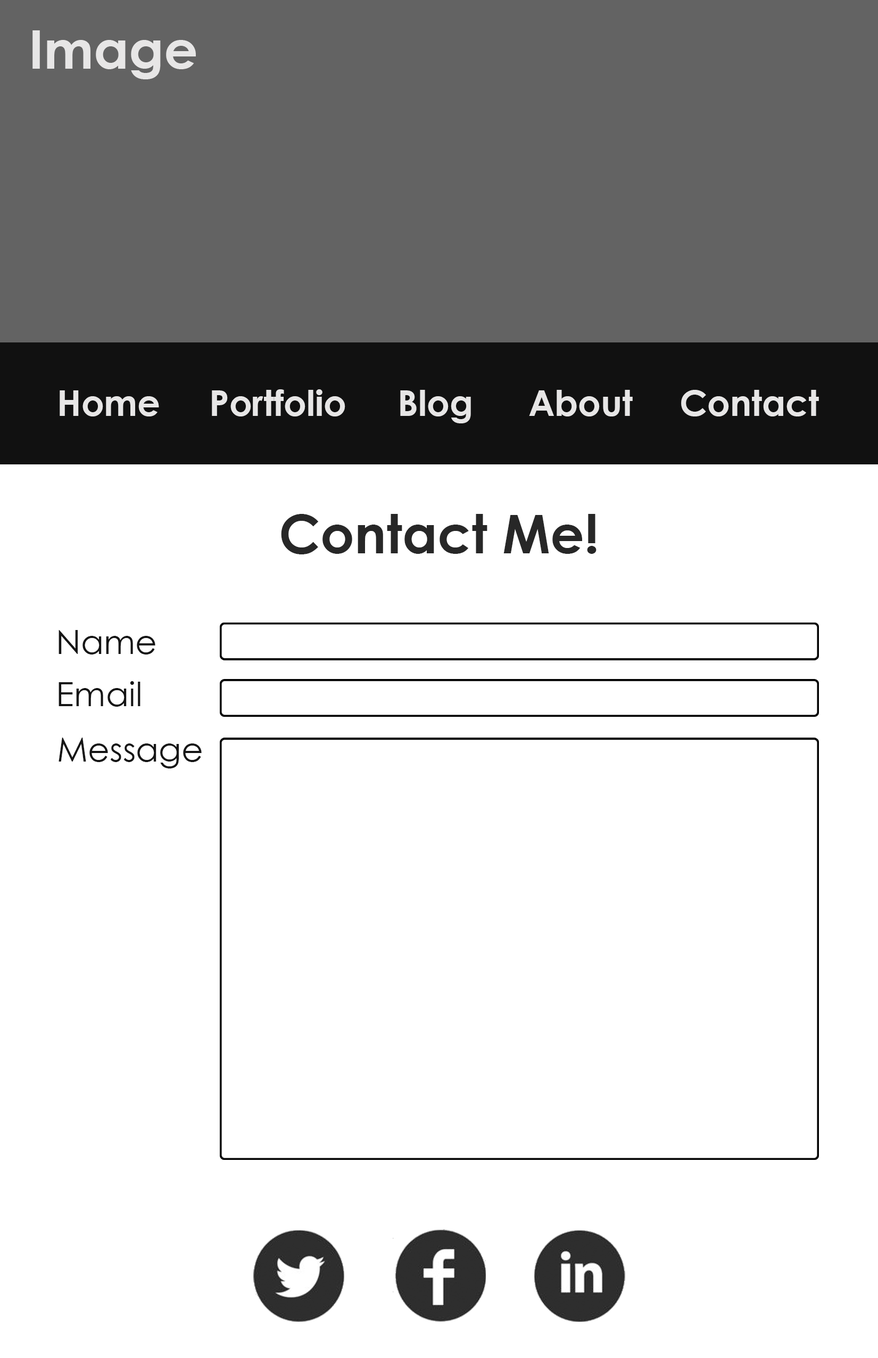
<style>
.page{position:relative;width:878px;height:1358px;background:#ffffff}
.page>*{position:absolute;margin:0}
.t1{font:53.2px "CenturyGothic-Bold";color:#e7e6e6}
.t2{font:35.5px "CenturyGothic-Bold";color:#e7e6e6}
.t3{font:53.2px "CenturyGothic-Bold";color:#272727}
.t4{font:33.7px "CenturyGothic";color:#151515}
</style>
<div class="page">
<p class="t1" style="left:32px;top:30px;width:164px;height:49px">Image</p>
<p class="t2" style="left:212px;top:389px;width:134px;height:27px">Portfolio</p>
<p class="t2" style="left:400px;top:390px;width:71px;height:33px">Blog</p>
<p class="t2" style="left:529px;top:390px;width:104px;height:26px">About</p>
<p class="t2" style="left:681px;top:390px;width:138px;height:26px">Contact</p>
<p class="t2" style="left:60px;top:390px;width:99px;height:26px">Home</p>
<p class="t3" style="left:281px;top:514px;width:316px;height:40px">Contact Me!</p>
<p class="t4" style="left:59px;top:630px;width:96px;height:24px">Name</p>
<p class="t4" style="left:59px;top:681px;width:82px;height:25px">Email</p>
<p class="t4" style="left:59px;top:737px;width:143px;height:31px">Message</p>
</div>
